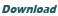
<style>
.page{position:relative;width:58px;height:16px;background:#ffffff}
.page>*{position:absolute;margin:0}
.t1{font:12.4px "ErasITC-Bold";color:#275c5f;scale:0.83 1}
</style>
<div class="page">
<p class="t1" style="left:2px;top:5px;width:55px;height:8px">Download</p>
</div>
